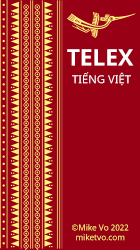
<style>
.page{position:relative;width:140px;height:250px;background:#970015}
.page>*{position:absolute;margin:0}
.t1{font:22.7px "NotoSans-Bold";color:#ffffff}
.t2{font:11.2px "NotoSans";color:#ffffff}
.t3{font:8.2px "NotoSans";color:#fff47d}
</style>
<div class="page">
<p class="t1" style="left:67px;top:49px;width:67px;height:17px">TELEX</p>
<p class="t2" style="left:72px;top:72px;width:59px;height:14px">TIẾNG VIỆT</p>
<p class="t3" style="left:72px;top:224px;width:57px;height:17px;text-align:center">©Mike Vo 2022<br>miketvo.com</p>
</div>
